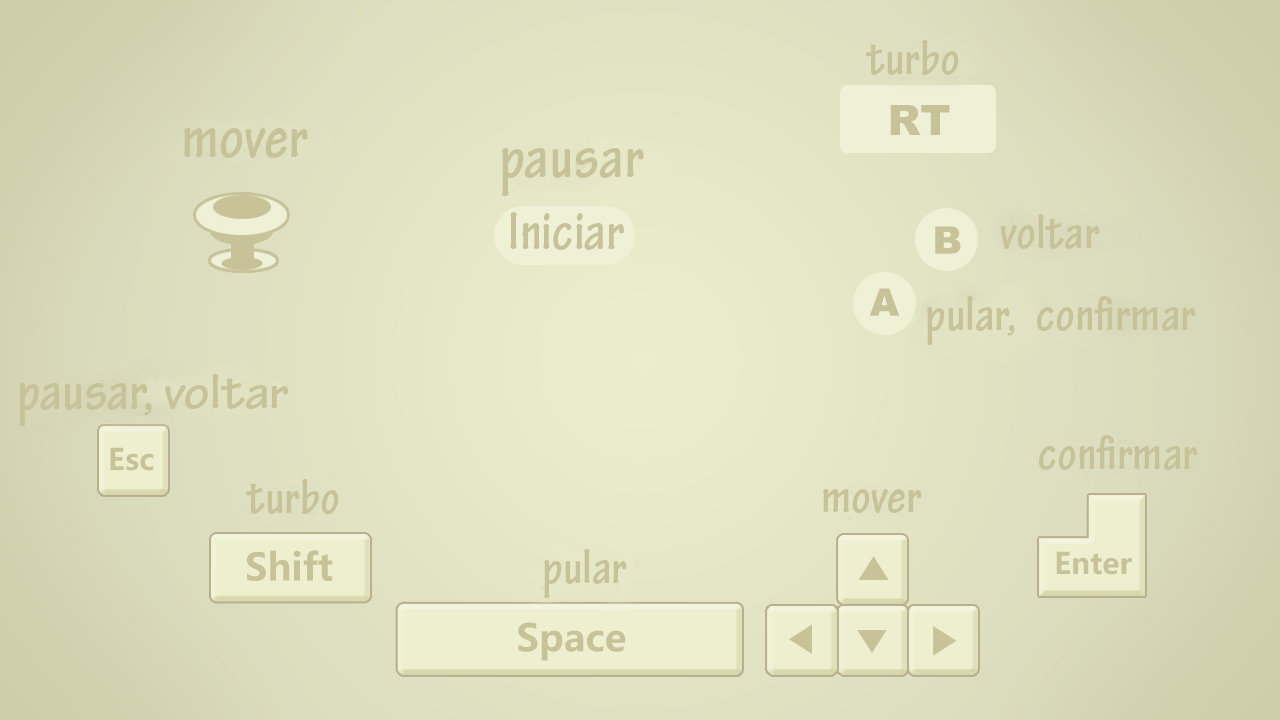
<style>
.page{position:relative;width:1280px;height:720px}
.page>*{position:absolute;margin:0}
.t1{font:51.2px "TektonPro-BoldCond";color:#c8c299}
.t2{font:64.6px "TektonPro-BoldCond";color:#c8c299}
.t3{font:57.4px "TektonPro-BoldCond";color:#c8c299}
.t4{font:51.2px "TektonPro-Bold";color:#c8c299}
.t5{font:58.3px "TektonPro-BoldCond";color:#c8c299}
</style>
<div class="page">
<p class="t1" style="left:866px;top:40px;width:93px;height:35px">turbo</p>
<p class="t2" style="left:184px;top:128px;width:124px;height:30px">mover</p>
<p class="t2" style="left:502px;top:148px;width:142px;height:48px">pausar</p>
<p class="t3" style="left:510px;top:212px;width:114px;height:38px">Iniciar</p>
<p class="t1" style="left:1000px;top:214px;width:100px;height:35px">voltar</p>
<p class="t1" style="left:927px;top:296px;width:88px;height:49px">pular,</p>
<p class="t1" style="left:1037px;top:296px;width:159px;height:35px">confirmar</p>
<p class="t4" style="left:165px;top:374px;width:123px;height:35px">voltar</p>
<p class="t5" style="left:19px;top:383px;width:133px;height:43px">pausar,</p>
<p class="t1" style="left:1039px;top:435px;width:159px;height:35px">confirmar</p>
<p class="t1" style="left:246px;top:479px;width:93px;height:35px">turbo</p>
<p class="t1" style="left:823px;top:489px;width:99px;height:24px">mover</p>
<p class="t1" style="left:544px;top:549px;width:83px;height:49px">pular</p>
</div>
